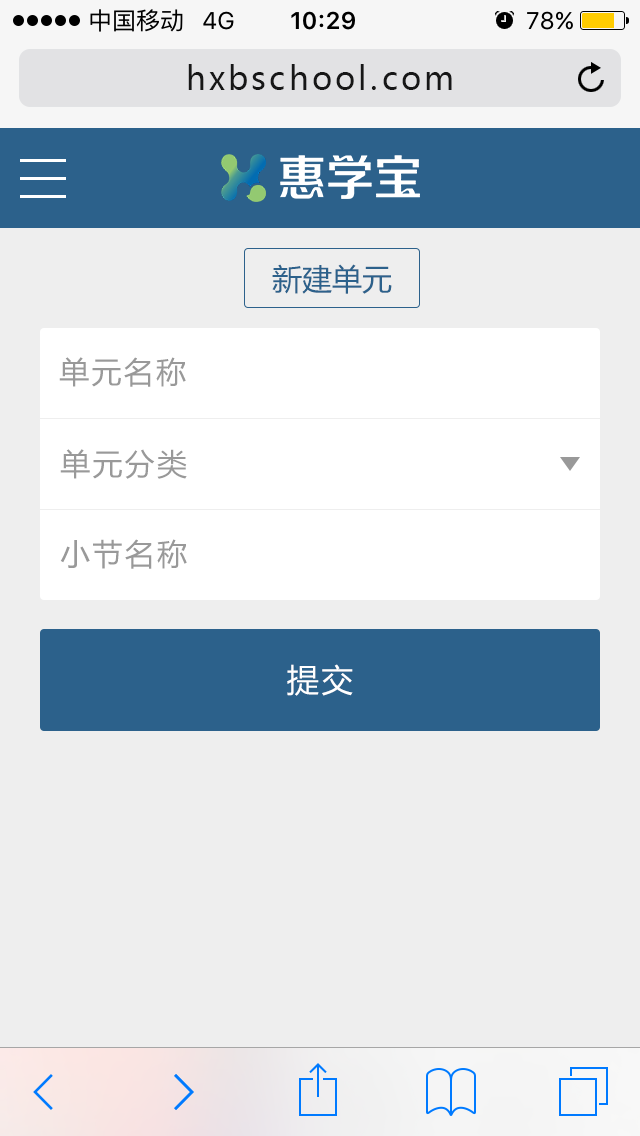
<style>
.page{position:relative;width:640px;height:1136px;background:#eeeeee}
.page>*{position:absolute;margin:0}
.t1{font:32px "MicrosoftYaHei";letter-spacing:0.1em;color:#171717}
.t2{font:30px "MicrosoftYaHei";color:#2c618b}
.t3{font:30px "MicrosoftYaHei";letter-spacing:0.075em;color:#999999}
.t4{font:32px "MicrosoftYaHei";letter-spacing:0.075em;color:#ffffff}
</style>
<div class="page">
<p class="t1" style="left:188px;top:64px;width:264px;height:26px">hxbschool.com</p>
<p class="t2" style="left:272px;top:264px;width:120px;height:30px">新建单元</p>
<p class="t3" style="left:59px;top:357px;width:127px;height:30px">单元名称</p>
<p class="t3" style="left:60px;top:449px;width:127px;height:30px">单元分类</p>
<p class="t3" style="left:60px;top:539px;width:127px;height:30px">小节名称</p>
<p class="t4" style="left:287px;top:664px;width:66px;height:32px">提交</p>
</div>
